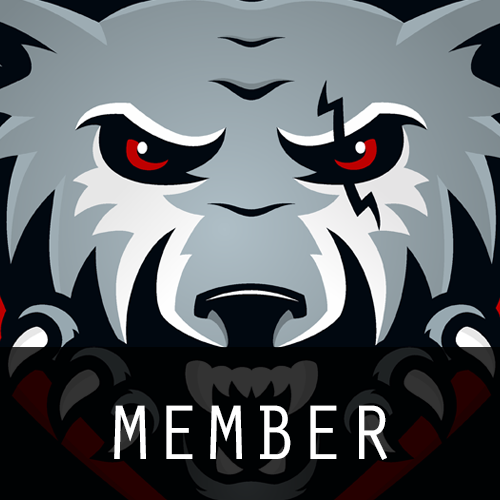
<style>
.page{position:relative;width:500px;height:500px}
.page>*{position:absolute;margin:0}
.t1{font:80px "OratorStd";color:#ffffff;text-transform:uppercase}
</style>
<div class="page">
<p class="t1" style="left:114px;top:405px;width:273px;height:55px">MEMBER</p>
</div>
